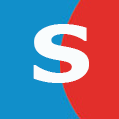
<style>
.page{position:relative;width:119px;height:119px;background:#118fca}
.page>*{position:absolute;margin:0}
.t1{font:78.9px "Verdana-Bold";color:#f9fcfd;scale:1.12 1}
</style>
<div class="page">
<p class="t1" style="left:33px;top:24px;width:56px;height:59px">S</p>
</div>
